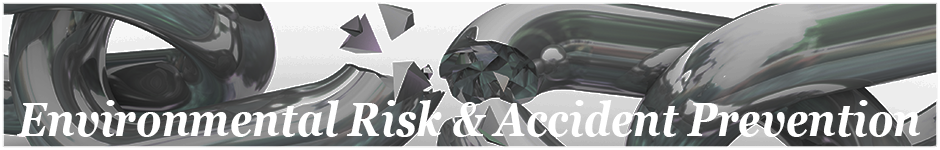
<style>
.page{position:relative;width:940px;height:150px}
.page>*{position:absolute;margin:0}
.t1{font:47px "Georgia-BoldItalic";color:#ffffff;scale:0.86 1}
</style>
<div class="page">
<p class="t1" style="left:17px;top:100px;width:903px;height:37px">Environmental Risk &amp; Accident Prevention</p>
</div>
